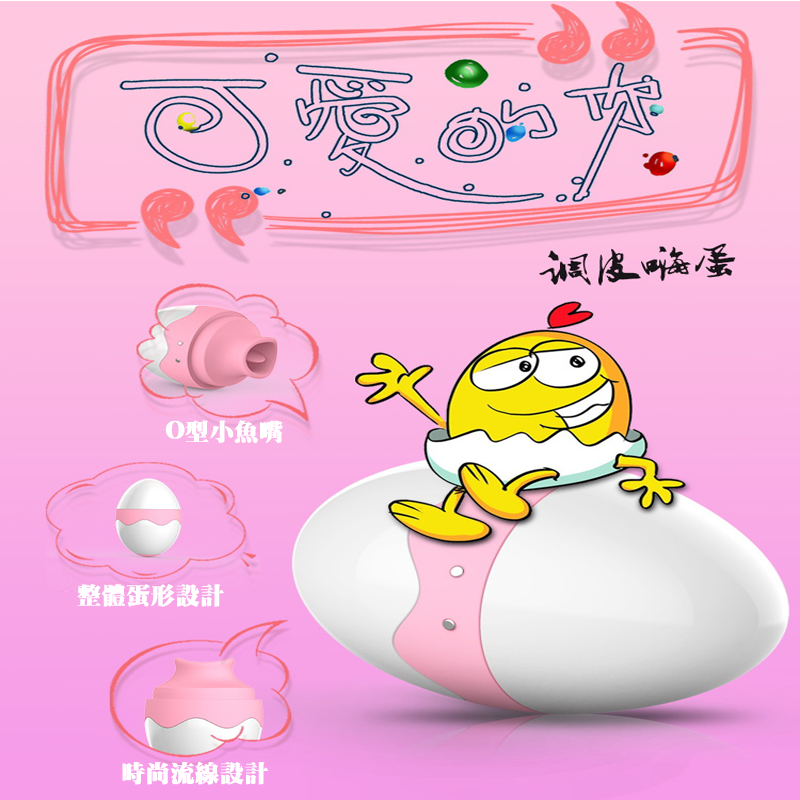
<style>
.page{position:relative;width:800px;height:800px}
.page>*{position:absolute;margin:0}
.t1{font:24px "HanWangMingBlack";color:#ffffff;font-weight:bold}
</style>
<div class="page">
<p class="t1" style="left:165px;top:420px;width:118px;height:23px">O型小魚嘴</p>
<p class="t1" style="left:77px;top:584px;width:147px;height:23px">整體蛋形設計</p>
<p class="t1" style="left:122px;top:762px;width:146px;height:23px">時尚流線設計</p>
</div>
